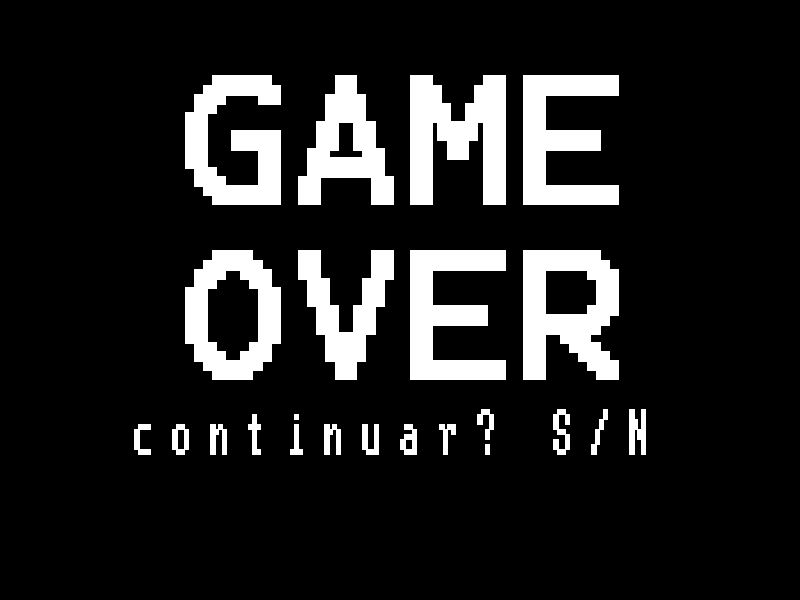
<style>
.page{position:relative;width:800px;height:600px;background:#000000}
.page>*{position:absolute;margin:0}
.t1{font:145.8px "Terminal";letter-spacing:0.02em;color:#ffffff;font-weight:bold}
.t2{font:62.5px "Terminal";letter-spacing:0.02em;color:#ffffff;font-weight:bold;scale:0.79 1}
</style>
<div class="page">
<p class="t1" style="left:185px;top:75px;width:434px;height:305px;text-align:center">GAME<br>OVER</p>
<p class="t2" style="left:134px;top:409px;width:512px;height:46px">continuar? S/N</p>
</div>
